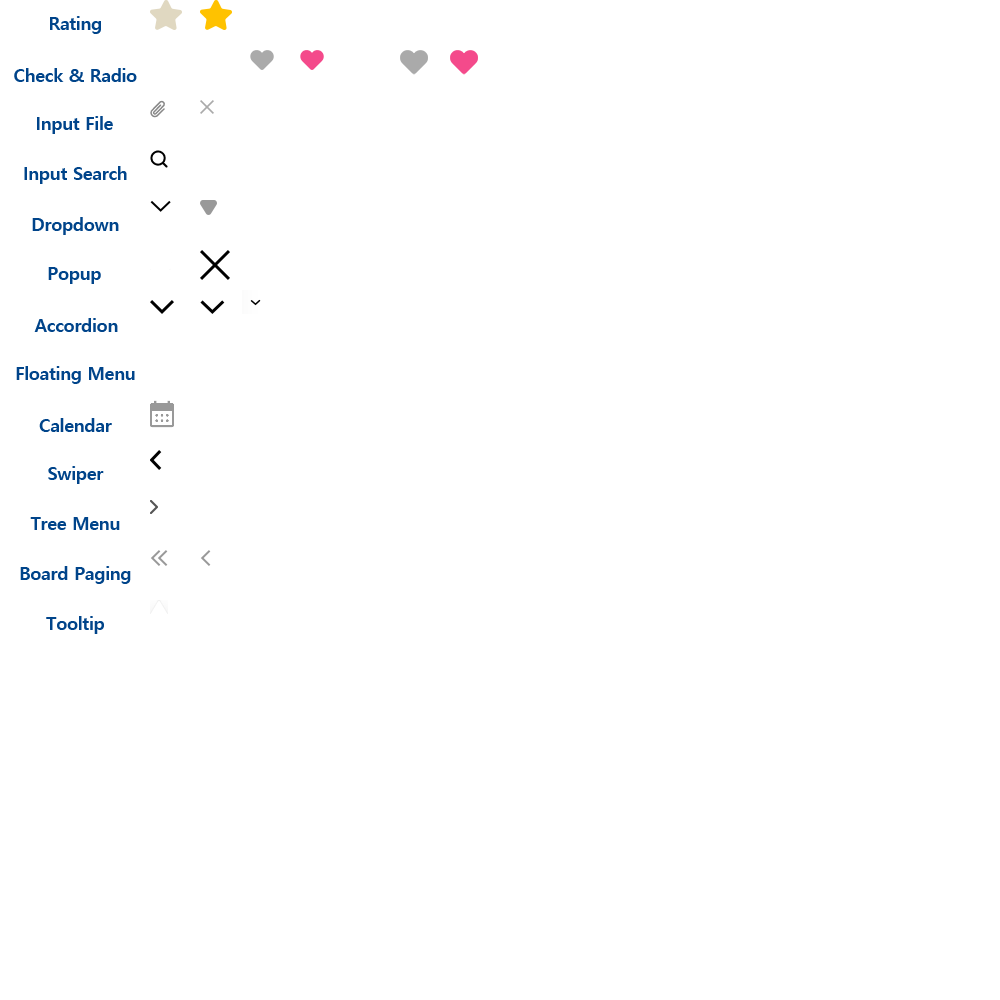
<style>
.page{position:relative;width:1000px;height:1000px;background:#ffffff}
.page>*{position:absolute;margin:0}
.t1{font:18px "MalgunGothicBold";letter-spacing:-0.02em;color:#00448a}
</style>
<div class="page">
<p class="t1" style="left:50px;top:16px;width:51px;height:18px">Rating</p>
<p class="t1" style="left:14px;top:68px;width:123px;height:14px">Check &amp; Radio</p>
<p class="t1" style="left:37px;top:116px;width:76px;height:18px">Input File</p>
<p class="t1" style="left:24px;top:166px;width:103px;height:18px">Input Search</p>
<p class="t1" style="left:32px;top:217px;width:87px;height:18px">Dropdown</p>
<p class="t1" style="left:48px;top:267px;width:53px;height:17px">Popup</p>
<p class="t1" style="left:34px;top:318px;width:84px;height:14px">Accordion</p>
<p class="t1" style="left:16px;top:366px;width:119px;height:18px">Floating Menu</p>
<p class="t1" style="left:39px;top:418px;width:73px;height:14px">Calendar</p>
<p class="t1" style="left:48px;top:466px;width:56px;height:18px">Swiper</p>
<p class="t1" style="left:30px;top:517px;width:90px;height:13px">Tree Menu</p>
<p class="t1" style="left:20px;top:566px;width:111px;height:18px">Board Paging</p>
<p class="t1" style="left:46px;top:616px;width:58px;height:18px">Tooltip</p>
</div>
